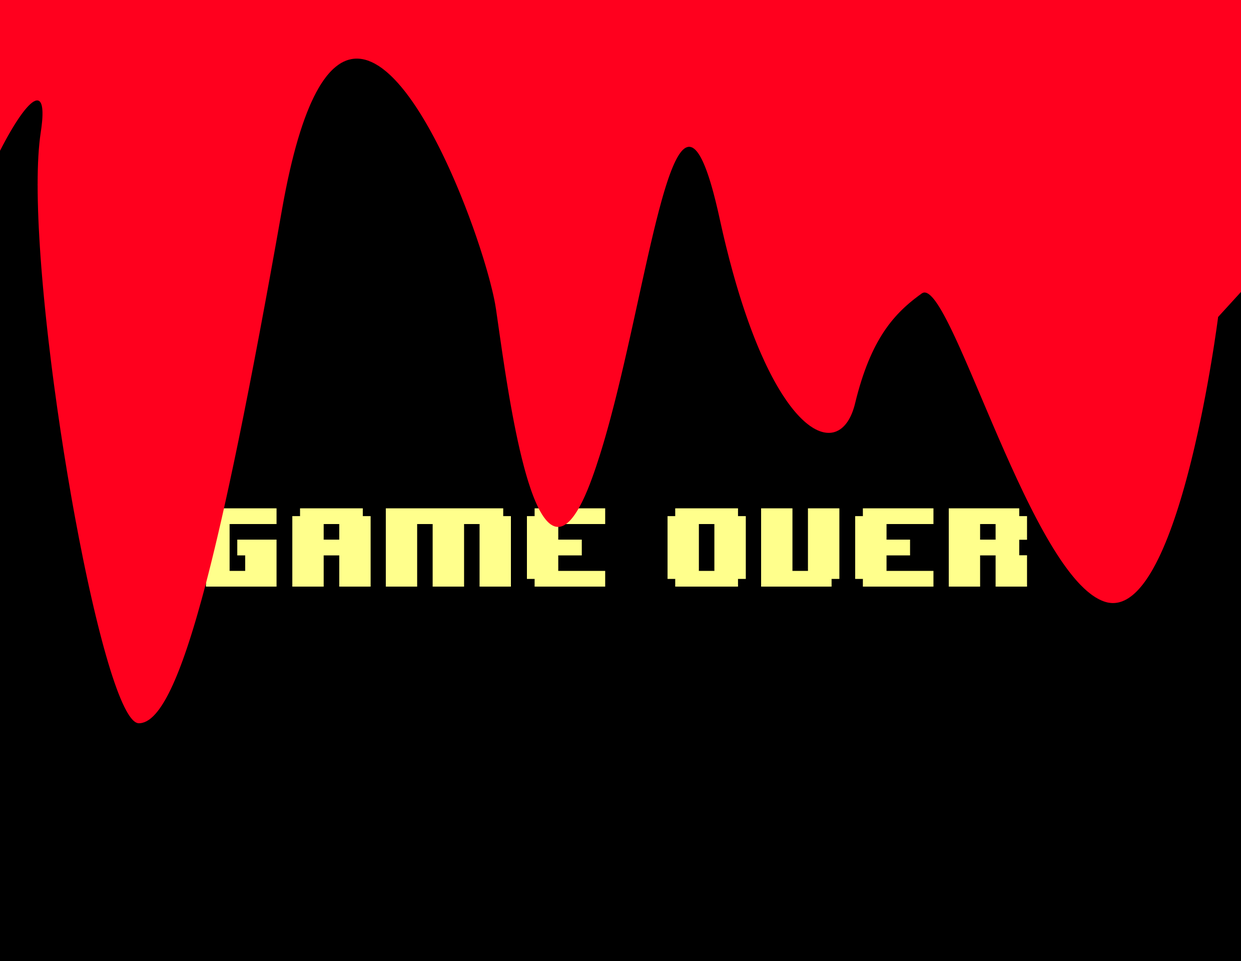
<style>
.page{position:relative;width:1241px;height:961px;background:#000000}
.page>*{position:absolute;margin:0}
.t1{font:93.8px "8BITWONDERNominal";color:#ffff8c}
</style>
<div class="page">
<p class="t1" style="left:198px;top:508px;width:829px;height:79px">GAme over</p>
</div>
